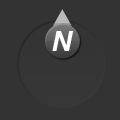
<style>
.page{position:relative;width:120px;height:120px;background:#333333}
.page>*{position:absolute;margin:0}
.t1{font:27.5px "HelveticaNeue-BoldItalic";letter-spacing:0.05em;color:#ffffff}
</style>
<div class="page">
<p class="t1" style="left:52px;top:31px;width:22px;height:20px">N</p>
</div>
